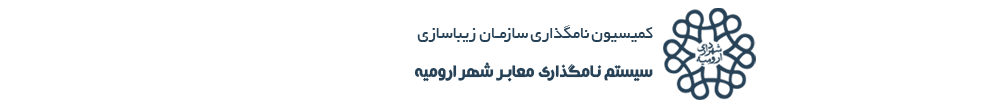
<style>
.page{position:relative;width:1000px;height:110px;background:#ffffff}
.page>*{position:absolute;margin:0}
.t1{font:18px "BYekan";color:#274257}
.t2{font:20px "Mj_CasablancaHeavy";color:#274257}
</style>
<div class="page">
<p class="t1" style="left:414px;top:25px;width:239px;height:57px">کمیسیون نامگذاری سازمـان زیباسازی<br><span class="t2">سيستم نـامگذاري معابـر شهر اروميه</span></p>
</div>
